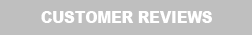
<style>
.page{position:relative;width:252px;height:35px;background:#bfbfbf}
.page>*{position:absolute;margin:0}
.t1{font:27.8px "Arial-Black";color:#ffffff;scale:0.9 1}
</style>
<div class="page">
<p class="t1" style="left:41px;top:11px;width:171px;height:12px">CUSTOMER REVIEWS</p>
</div>
